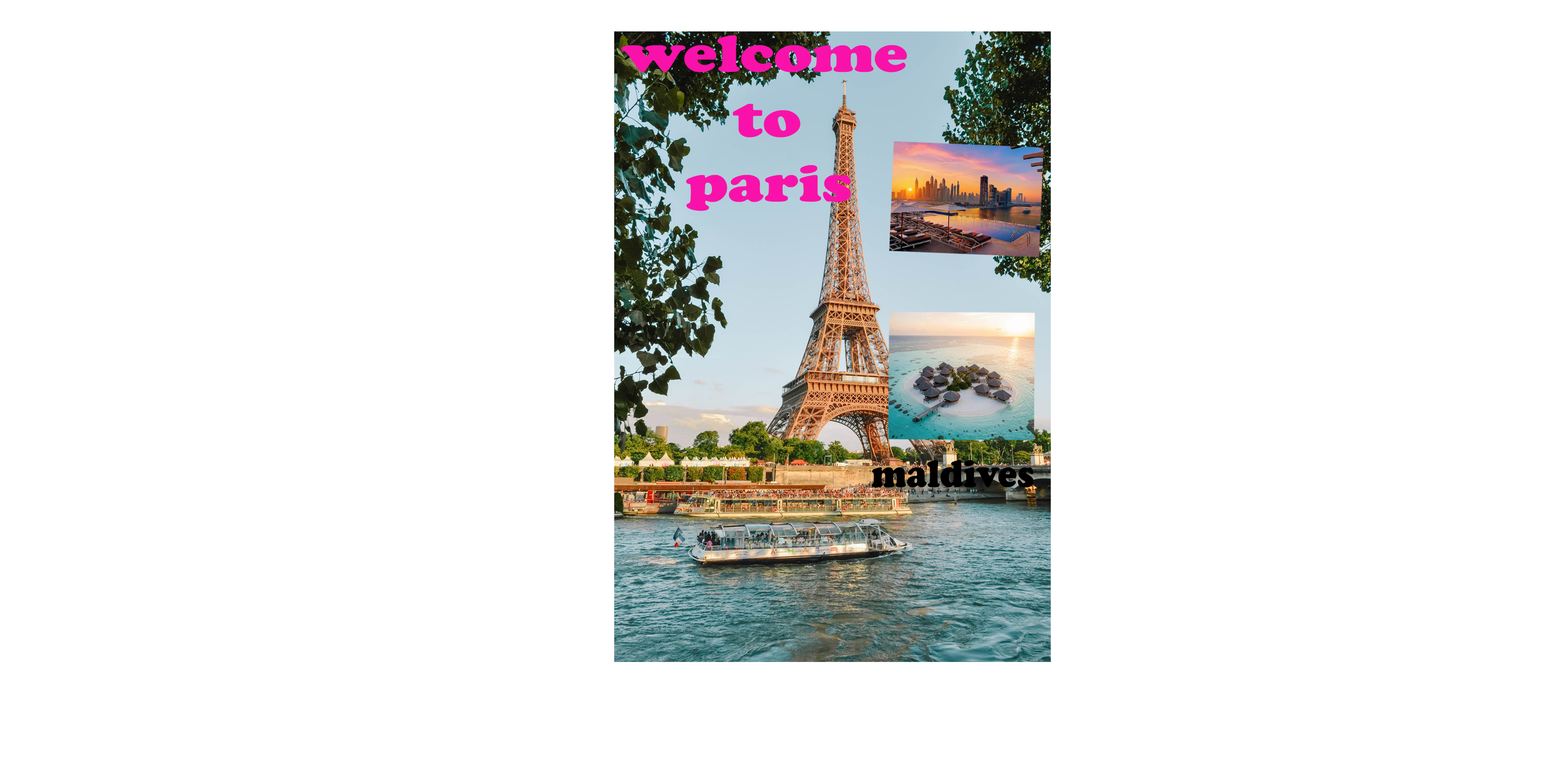
<style>
.page{position:relative;width:1544px;height:772px;background:#ffffff}
.page>*{position:absolute;margin:0}
.t1{font:54px "CooperBlack";color:#f812a9;scale:1.18 1}
.t2{font:40.3px "CooperBlack";color:#000000;scale:0.9 1}
</style>
<div class="page">
<p class="t1" style="left:622px;top:35px;width:285px;height:176px">welcome <br>       to<br>    paris</p>
<p class="t2" style="left:872px;top:460px;width:162px;height:27px">maldives</p>
</div>
